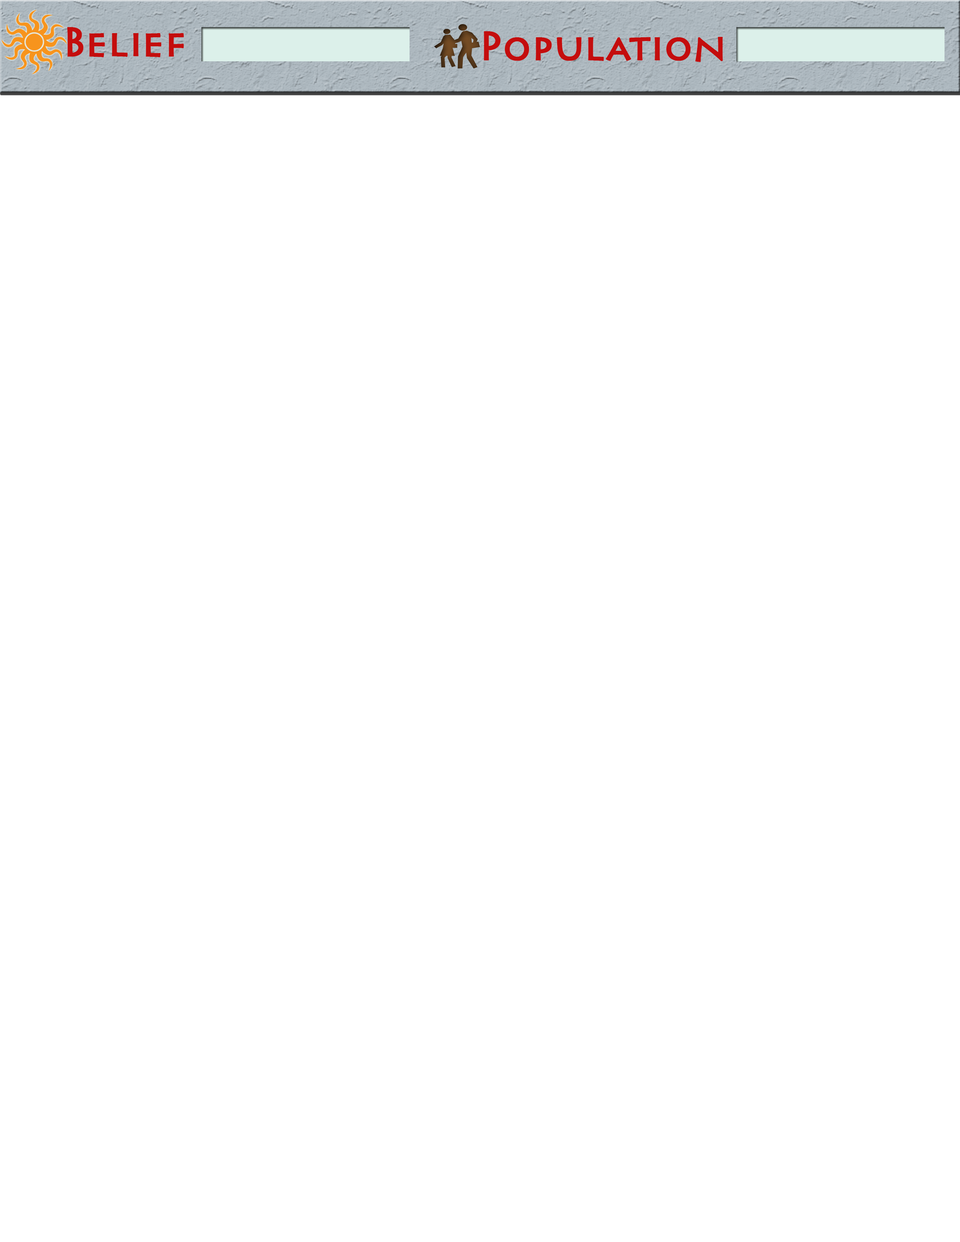
<style>
.page{position:relative;width:960px;height:1242px;background:#ffffff}
.page>*{position:absolute;margin:0}
.t1{font:37.6px "Pericles";color:#c40d0d;font-weight:bold}
</style>
<div class="page">
<p class="t1" style="left:67px;top:27px;width:117px;height:30px">Belief</p>
<p class="t1" style="left:484px;top:31px;width:239px;height:31px">Population</p>
</div>
